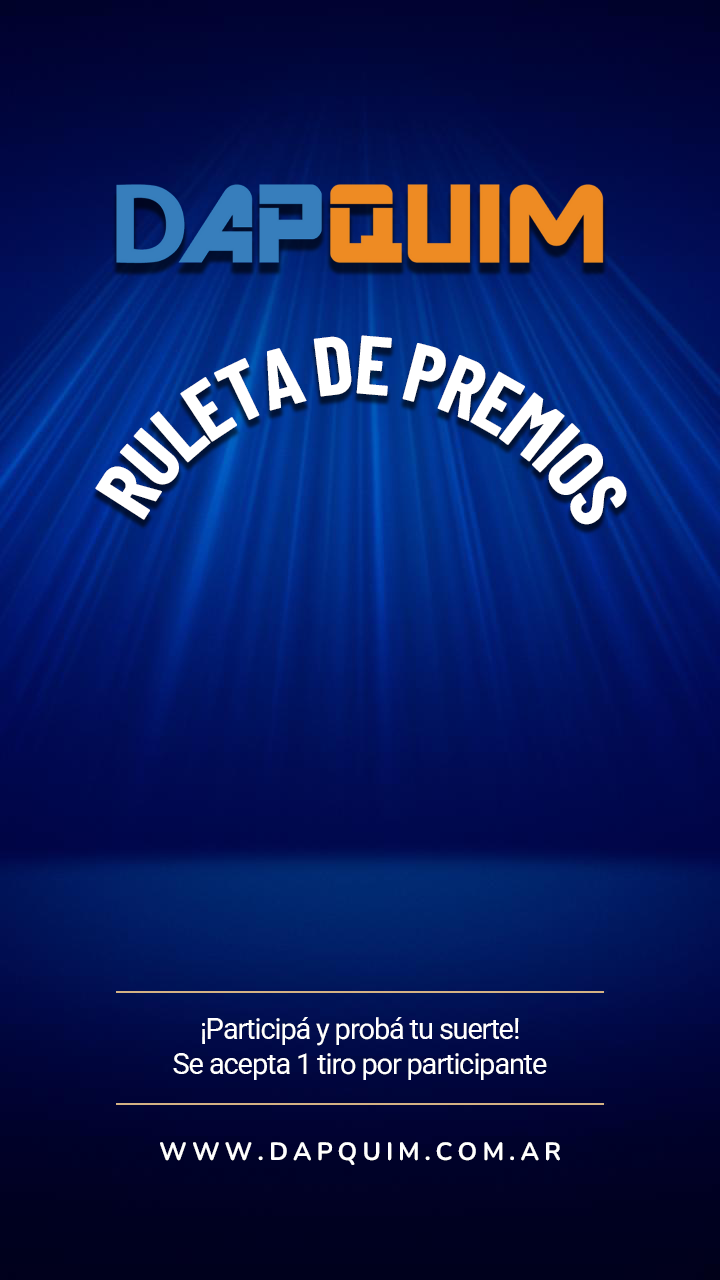
<style>
.page{position:relative;width:720px;height:1280px}
.page>*{position:absolute;margin:0}
.t1{font:83px "BarlowCondensed-Bold";letter-spacing:-0.04em;color:#ffffff}
.t2{font:76px "BarlowCondensed-Bold";letter-spacing:-0.04em;color:#ffffff}
.t3{font:29px "Roboto-Regular";letter-spacing:-0.04em;color:#ffffff}
.t4{font:25px "Nunito-Bold";letter-spacing:0.2em;color:#ffffff}
</style>
<div class="page">
<p class="t1" style="left:95px;top:335px;width:532px;height:190px;text-align:center"><span class="t2">                                        </span>RULETA DE PREMIOS</p>
<p class="t3" style="left:173px;top:1017px;width:374px;height:63px;text-align:center">¡Participá y probá tu suerte!<br>Se acepta 1 tiro por participante</p>
<p class="t4" style="left:160px;top:1142px;width:400px;height:23px">WWW.DAPQUIM.COM.AR</p>
</div>
